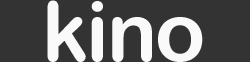
<style>
.page{position:relative;width:250px;height:62px;background:#333333}
.page>*{position:absolute;margin:0}
.t1{font:83.2px "ArialRoundedMTBold";color:#fafafa}
</style>
<div class="page">
<p class="t1" style="left:47px;top:0px;width:156px;height:62px">kino</p>
</div>
